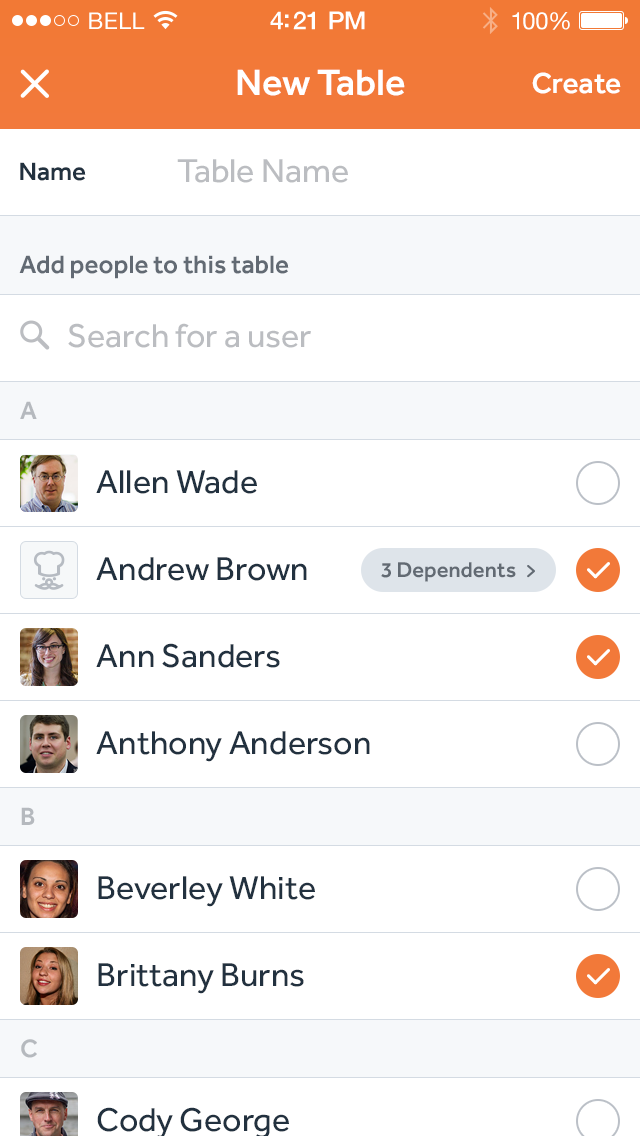
<style>
.page{position:relative;width:640px;height:1136px;background:#ffffff}
.page>*{position:absolute;margin:0}
.t1{font:23px "HelveticaNeue";letter-spacing:0.02em;color:#ffffff}
.t2{font:25px "HelveticaNeue-Medium";letter-spacing:-0.02em;color:#ffffff}
.t3{font:24px "HelveticaNeue";letter-spacing:-0.02em;color:#ffffff}
.t4{font:38px "Effra-Medium";color:#ffffff}
.t5{font:30px "Effra-Medium";color:#ffffff}
.t6{font:34px "Effra-Regular";color:#bbbdc1}
.t7{font:26px "Effra-Medium";color:#22313f}
.t8{font:26px "Effra-Medium";color:#626a73}
.t9{font:26px "Effra-Medium";color:#b5b9be}
.t10{font:34px "Effra-Regular";color:#22313f}
.t11{font:22px "Effra-Medium";color:#626a73}
</style>
<div class="page">
<p class="t1" style="left:89px;top:12px;width:56px;height:17px">BELL</p>
<p class="t2" style="left:270px;top:11px;width:95px;height:19px">4:21 PM</p>
<p class="t3" style="left:512px;top:12px;width:58px;height:18px">100%</p>
<p class="t4" style="left:237px;top:69px;width:168px;height:27px">New Table</p>
<p class="t5" style="left:532px;top:72px;width:89px;height:22px">Create</p>
<p class="t6" style="left:177px;top:159px;width:171px;height:24px">Table Name</p>
<p class="t7" style="left:20px;top:162px;width:66px;height:19px">Name</p>
<p class="t8" style="left:19px;top:255px;width:270px;height:24px">Add people to this table</p>
<p class="t6" style="left:68px;top:323px;width:243px;height:25px">Search for a user</p>
<p class="t9" style="left:20px;top:401px;width:17px;height:18px">A</p>
<p class="t10" style="left:96px;top:470px;width:161px;height:24px">Allen Wade</p>
<p class="t10" style="left:96px;top:557px;width:211px;height:24px">Andrew Brown</p>
<p class="t11" style="left:381px;top:562px;width:135px;height:20px">3 Dependents</p>
<p class="t10" style="left:96px;top:643px;width:184px;height:25px">Ann Sanders</p>
<p class="t10" style="left:96px;top:731px;width:274px;height:31px">Anthony Anderson</p>
<p class="t9" style="left:21px;top:807px;width:14px;height:18px">B</p>
<p class="t10" style="left:98px;top:876px;width:217px;height:31px">Beverley White</p>
<p class="t10" style="left:98px;top:963px;width:206px;height:31px">Brittany Burns</p>
<p class="t9" style="left:21px;top:1039px;width:16px;height:19px">C</p>
</div>
